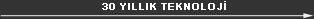
<style>
.page{position:relative;width:314px;height:19px;background:#333333}
.page>*{position:absolute;margin:0}
.t1{font:10px "Arial-BoldMT";color:#ffffff;font-weight:bold}
</style>
<div class="page">
<p class="t1" style="left:102px;top:1px;width:124px;height:9px">30 YILLIK TEKNOLOJİ</p>
</div>
